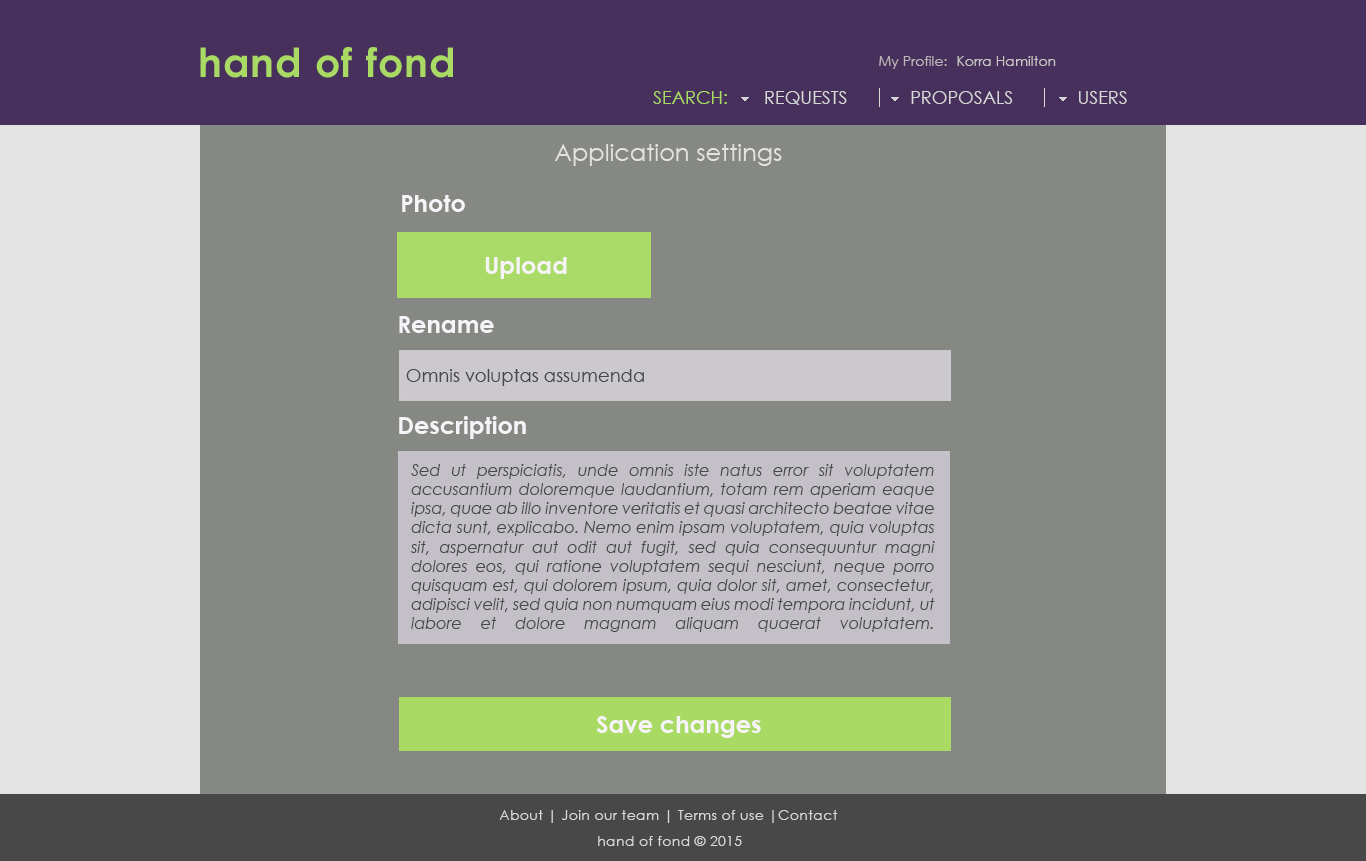
<style>
.page{position:relative;width:1366px;height:861px;background:#868983}
.page>*{position:absolute;margin:0}
.t1{font:14px "CenturyGothic";color:#bbb5b8}
.t2{font:14px "CenturyGothic";color:#c9c5c4}
.t3{font:18px "CenturyGothic";color:#a9da63}
.t4{font:18px "CenturyGothic";color:#d7d7d7}
.t5{font:24px "CenturyGothic";color:#e3e3e3}
.t6{font:24px "CenturyGothic-Bold";color:#f6f4f8}
.t7{font:18px "CenturyGothic";color:#484848}
.t8{font:16px "CenturyGothic-Italic";color:#484848}
.t9{font:14px "CenturyGothic";letter-spacing:0.025em;color:#d7d7d7}
</style>
<div class="page">
<p class="t1" style="left:879px;top:56px;width:68px;height:13px">My Profile:</p>
<p class="t2" style="left:957px;top:56px;width:99px;height:10px">Korra Hamilton</p>
<p class="t3" style="left:653px;top:91px;width:74px;height:13px">SEARCH:</p>
<p class="t4" style="left:765px;top:91px;width:82px;height:14px">REQUESTS</p>
<p class="t4" style="left:911px;top:91px;width:102px;height:13px">PROPOSALS</p>
<p class="t4" style="left:1079px;top:91px;width:48px;height:13px">USERS</p>
<p class="t5" style="left:555px;top:144px;width:227px;height:22px">Application settings</p>
<p class="t6" style="left:402px;top:195px;width:63px;height:17px">Photo</p>
<p class="t6" style="left:485px;top:257px;width:82px;height:22px">Upload</p>
<p class="t6" style="left:399px;top:316px;width:95px;height:17px">Rename</p>
<p class="t7" style="left:406px;top:369px;width:238px;height:17px">Omnis voluptas assumenda</p>
<p class="t6" style="left:399px;top:416px;width:127px;height:23px">Description</p>
<p class="t8" style="left:411px;top:464px;width:524px;height:168px;text-align:justify">Sed ut perspiciatis, unde omnis iste natus error sit voluptatem accusantium doloremque laudantium, totam rem aperiam eaque ipsa, quae ab illo inventore veritatis et quasi architecto beatae vitae dicta sunt, explicabo. Nemo enim ipsam voluptatem, quia voluptas sit, aspernatur aut odit aut fugit, sed quia consequuntur magni dolores eos, qui ratione voluptatem sequi nesciunt, neque porro quisquam est, qui dolorem ipsum, quia dolor sit, amet, consectetur, adipisci velit, sed quia non numquam eius modi tempora incidunt, ut labore et dolore magnam aliquam quaerat voluptatem.</p>
<p class="t6" style="left:596px;top:716px;width:165px;height:22px">Save changes</p>
<p class="t9" style="left:499px;top:810px;width:339px;height:13px">About | Join our team | Terms of use |Contact</p>
<p class="t9" style="left:598px;top:836px;width:144px;height:10px">hand of fond © 2015</p>
</div>
